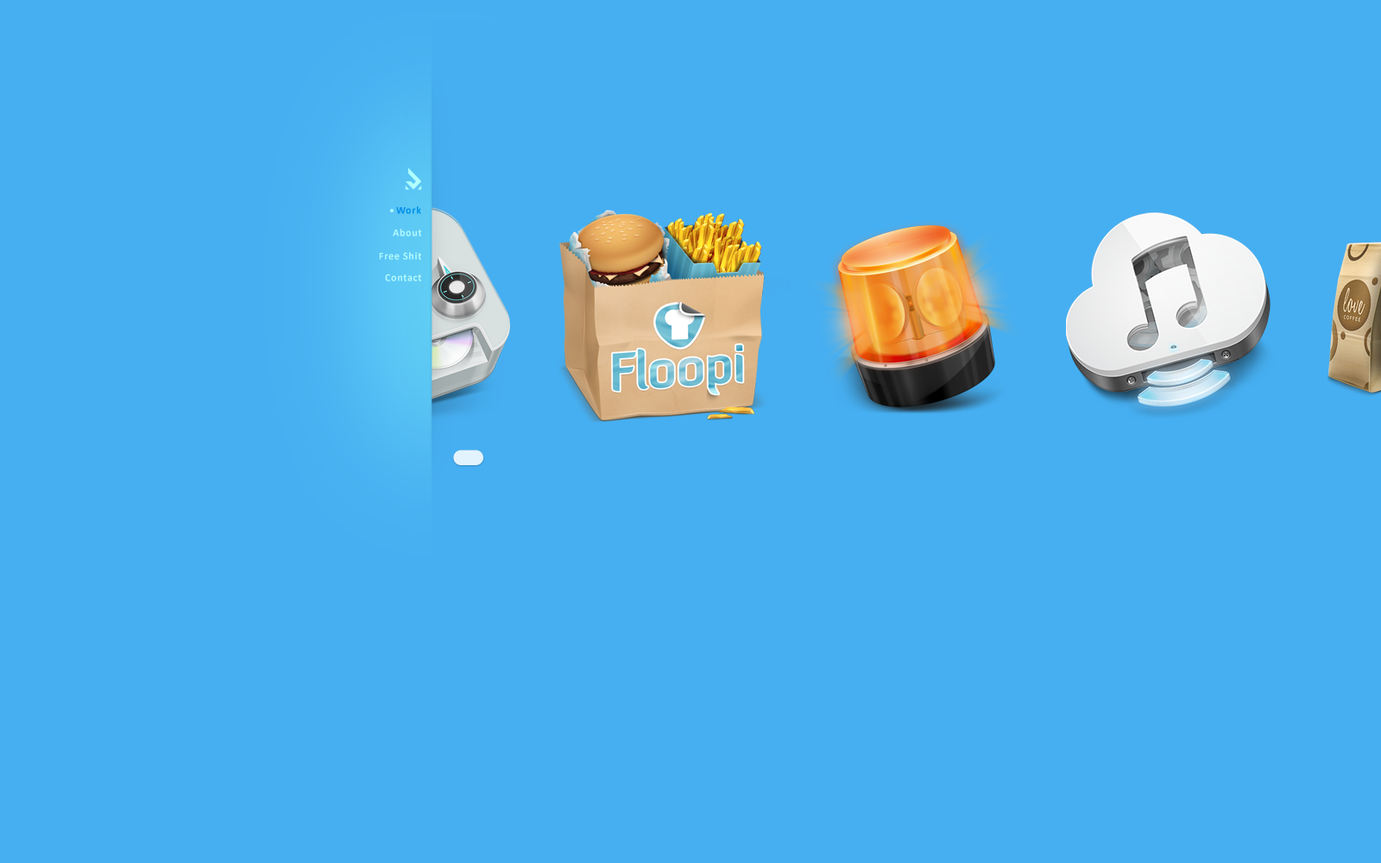
<style>
.page{position:relative;width:1381px;height:863px;background:#46aff1}
.page>*{position:absolute;margin:0}
.t1{font:10.4px "Calibri-Bold";letter-spacing:0.06em;color:#0091e9}
.t2{font:10.4px "Calibri-Bold";letter-spacing:0.06em;color:#b1f9fe}
.t3{font:10.4px "Calibri-Bold";letter-spacing:0.06em;color:#b1fafe}
</style>
<div class="page">
<p class="t1" style="left:396px;top:206px;width:25px;height:8px">Work</p>
<p class="t2" style="left:393px;top:229px;width:29px;height:8px">About</p>
<p class="t2" style="left:379px;top:252px;width:42px;height:8px">Free Shit</p>
<p class="t3" style="left:385px;top:274px;width:36px;height:7px">Contact</p>
</div>
